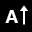
<style>
.page{position:relative;width:32px;height:32px;background:#000000}
.page>*{position:absolute;margin:0}
.t1{font:16.7px "Meiryo-Bold";letter-spacing:-0.02em;color:#ffffff}
</style>
<div class="page">
<p class="t1" style="left:5px;top:10px;width:13px;height:13px">A</p>
</div>
